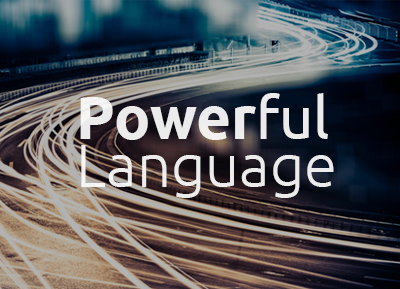
<style>
.page{position:relative;width:400px;height:289px}
.page>*{position:absolute;margin:0}
.t1{font:60px/48px "Ubuntu-Light";color:#ffffff}
.t2{font:60px/48px "Ubuntu-Bold";color:#ffffff}
.t3{font:60px/48px "Ubuntu";color:#ffffff}
</style>
<div class="page">
<p class="t1" style="left:80px;top:93px;width:254px;height:105px;opacity:0.88"><span class="t2">Power</span><span class="t3">ful<br></span>Language</p>
</div>
